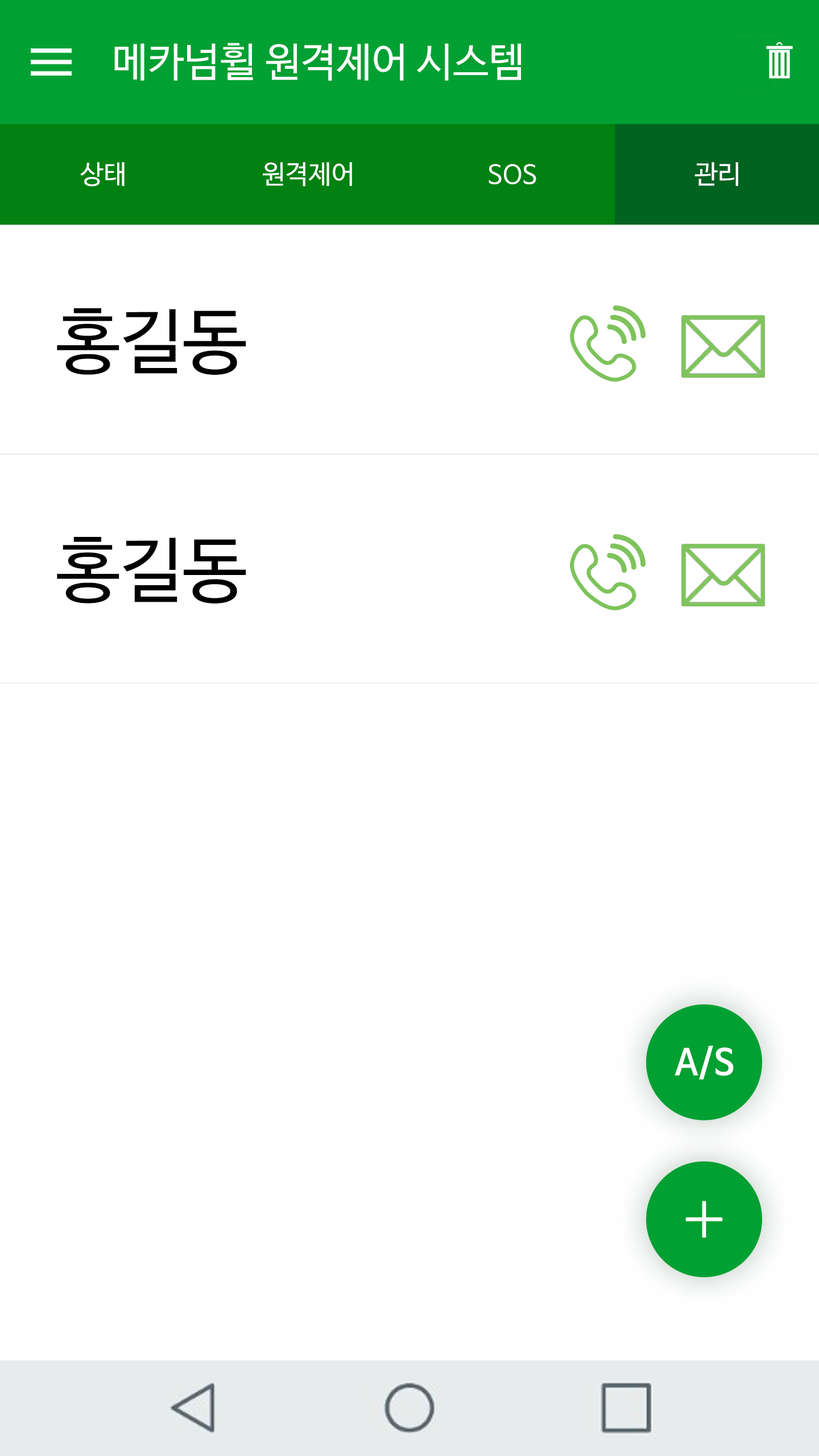
<style>
.page{position:relative;width:819px;height:1456px;background:#ffffff}
.page>*{position:absolute;margin:0}
.t1{font:40.3px "NanumBarunGothicOTF";color:#ffffff}
.t2{font:26.1px "NanumBarunGothicOTF";color:#ffffff}
.t3{font:71.1px "NanumBarunGothicOTF";color:#000000}
.t4{font:35.5px "NanumBarunGothicOTFBold";color:#ffffff}
</style>
<div class="page">
<p class="t1" style="left:114px;top:43px;width:407px;height:38px">메카넘휠 원격제어 시스템</p>
<p class="t2" style="left:80px;top:162px;width:45px;height:25px">상태</p>
<p class="t2" style="left:263px;top:162px;width:89px;height:25px">원격제어</p>
<p class="t2" style="left:489px;top:164px;width:47px;height:20px">SOS</p>
<p class="t2" style="left:694px;top:162px;width:44px;height:24px">관리</p>
<p class="t3" style="left:57px;top:308px;width:189px;height:67px">홍길동</p>
<p class="t3" style="left:57px;top:537px;width:189px;height:66px">홍길동</p>
<p class="t4" style="left:675px;top:1045px;width:59px;height:34px">A/S</p>
</div>
